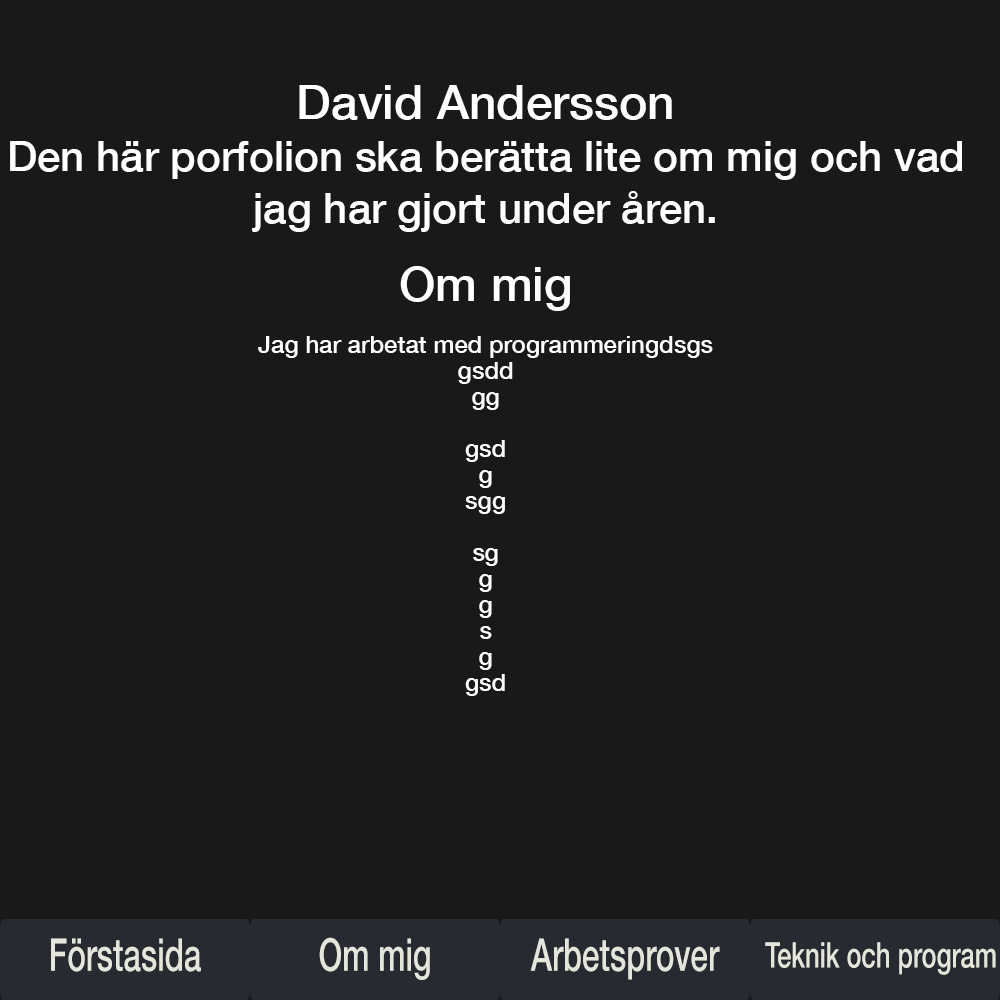
<style>
.page{position:relative;width:1000px;height:1000px;background:#191919}
.page>*{position:absolute;margin:0}
.t1{font:42px/26px "HelveticaNeue-Medium";color:#ffffff}
.t2{font:48px/26px "HelveticaNeue-Medium";color:#ffffff}
.t3{font:24px/26px "HelveticaNeue-Medium";color:#ffffff}
.t4{font:45.3px "HelveticaNeue-Medium";color:#e5e6db;scale:0.69 1}
.t5{font:35.4px "HelveticaNeue-Medium";color:#e5e6db;scale:0.72 1}
</style>
<div class="page">
<p class="t1" style="left:10px;top:85px;width:952px;height:611px;text-align:center"><span class="t2">David Andersson<br></span><br>Den här porfolion ska berätta lite om mig och vad<br><br>jag har gjort under åren.<br><br><br><span class="t2">Om mig<br><br></span><span class="t3">Jag har arbetat med programmeringdsgs<br>gsdd<br>gg<br><br>gsd<br>g<br>sgg<br><br>sg<br>g<br>g<br>s<br>g<br>gsd</span></p>
<p class="t4" style="left:51px;top:938px;width:150px;height:34px">Förstasida</p>
<p class="t4" style="left:319px;top:937px;width:111px;height:43px">Om mig</p>
<p class="t4" style="left:530px;top:938px;width:190px;height:42px">Arbetsprover</p>
<p class="t5" style="left:765px;top:942px;width:231px;height:33px">Teknik och program</p>
</div>
